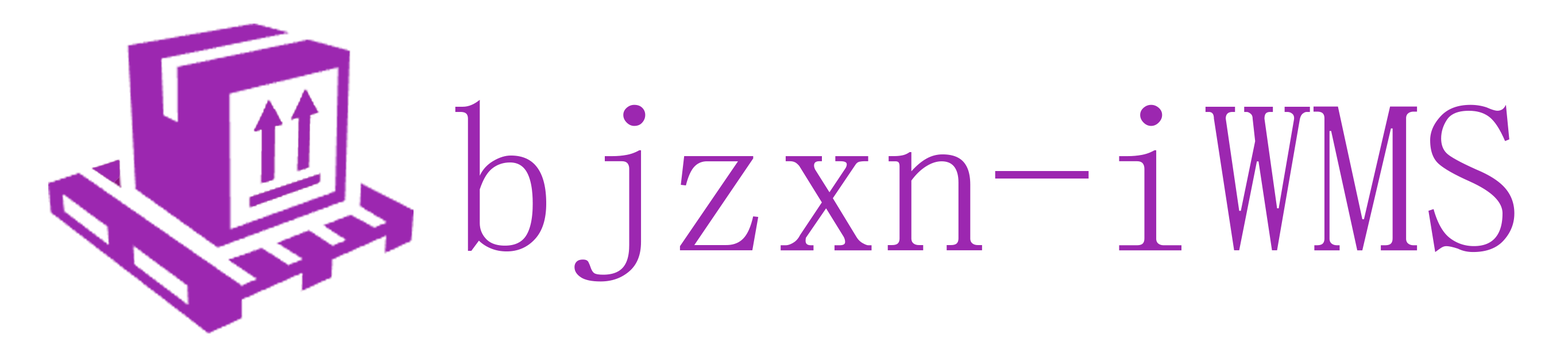
<style>
.page{position:relative;width:1568px;height:357px;background:#ffffff}
.page>*{position:absolute;margin:0}
.t1{font:215.4px "SimSun";color:#9c27b0}
</style>
<div class="page">
<p class="t1" style="left:455px;top:100px;width:1060px;height:182px">bjzxn-iWMS</p>
</div>
